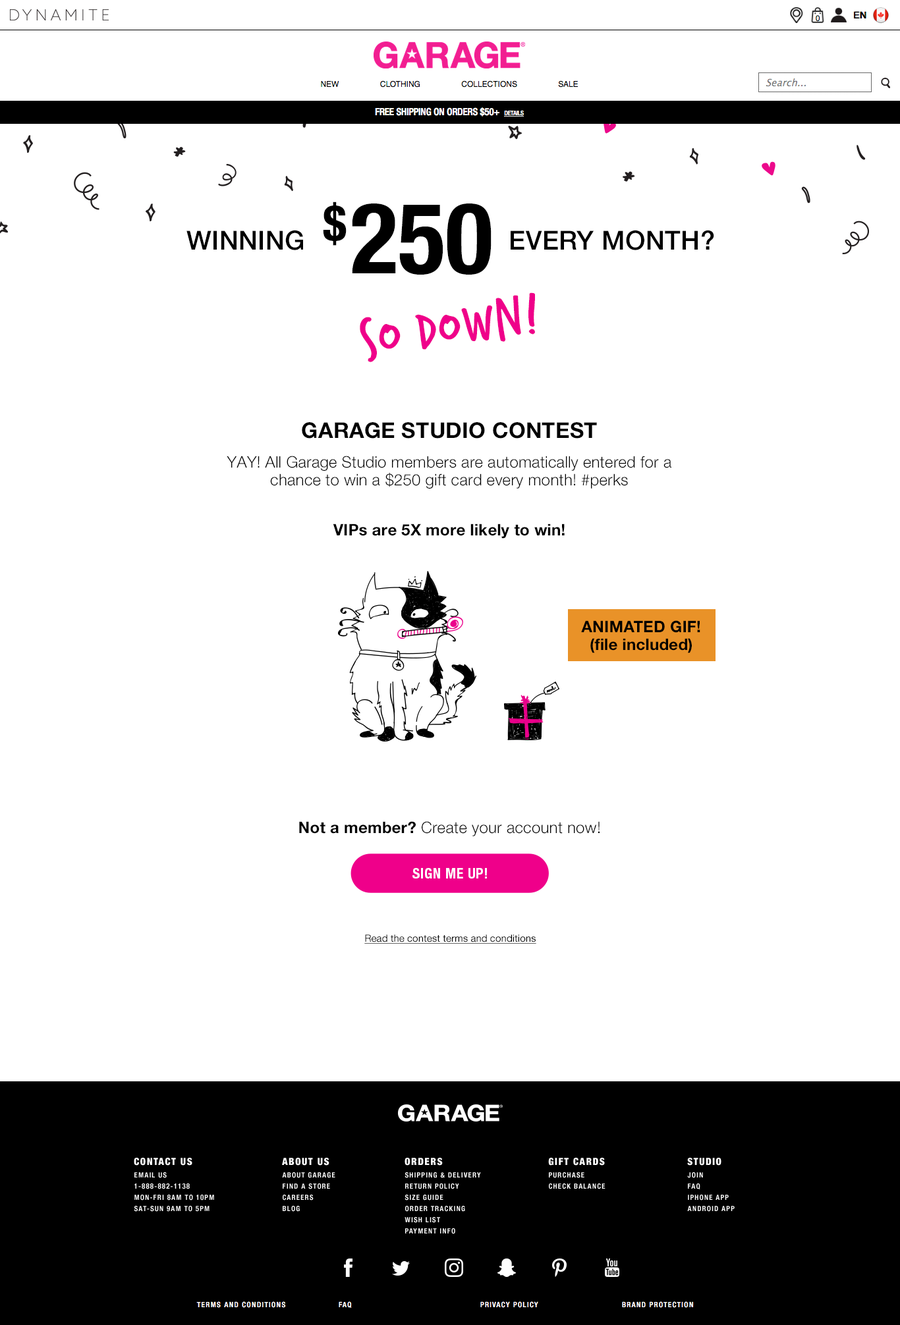
<style>
.page{position:relative;width:900px;height:1325px;background:#ffffff}
.page>*{position:absolute;margin:0}
.t1{font:98.8px "HelveticaNeueLTStd-BdCn";color:#000000;text-transform:uppercase}
.t2{font:49.4px "HelveticaNeueLTStd-BdCn";color:#000000;text-transform:uppercase}
.t3{font:26.3px "HelveticaNeueLTStd-Md";letter-spacing:0.01em;color:#000000;text-transform:uppercase}
.t4{font:59.3px "Verveine-Regular";letter-spacing:0.01em;color:#ef008a;text-transform:uppercase}
.t5{font:21.7px "HelveticaNeueLTStd-Bd";letter-spacing:0.01em;color:#000000;text-transform:uppercase}
.t6{font:15.8px/17.8px "HelveticaNeueLTStd-Lt";letter-spacing:0.01em;color:#000000}
.t7{font:15.8px "HelveticaNeueLTStd-Bd";letter-spacing:0.01em;color:#000000}
.t8{font:15.8px/17.8px "HelveticaNeueLTStd-Bd";letter-spacing:0.01em;color:#000000}
.t9{font:15.8px "HelveticaNeueLTStd-Lt";letter-spacing:0.01em;color:#000000}
.t10{font:14.5px "HelveticaNeueLTStd-BdCn";letter-spacing:0.025em;color:#fefefe;text-transform:uppercase}
.t11{font:9.9px "HelveticaNeueLTStd-Roman";color:#000000;text-decoration:underline}
</style>
<div class="page">
<p class="t1" style="left:323px;top:202px;width:168px;height:73px"><span class="t2">$</span>250</p>
<p class="t3" style="left:186px;top:230px;width:117px;height:20px">Winning</p>
<p class="t3" style="left:510px;top:230px;width:204px;height:20px">Every Month?</p>
<p class="t4" style="left:360px;top:292px;width:175px;height:70px;rotate:-9deg">So Down!</p>
<p class="t5" style="left:302px;top:422px;width:295px;height:17px">Garage Studio Contest</p>
<p class="t6" style="left:227px;top:456px;width:444px;height:33px;text-align:center">YAY! All Garage Studio members are automatically entered for a chance to win a $250 gift card every month! #perks</p>
<p class="t7" style="left:333px;top:524px;width:231px;height:15px">VIPs are 5X more likely to win!</p>
<p class="t8" style="left:581px;top:620px;width:119px;height:33px;text-align:center">ANIMATED GIF!<br>(file included)</p>
<p class="t9" style="left:299px;top:821px;width:300px;height:16px"><span class="t7">Not a member?</span> Create your account now!</p>
<p class="t10" style="left:412px;top:868px;width:75px;height:11px">Sign me up!</p>
<p class="t11" style="left:364px;top:935px;width:172px;height:9px">Read the contest terms and conditions</p>
</div>
